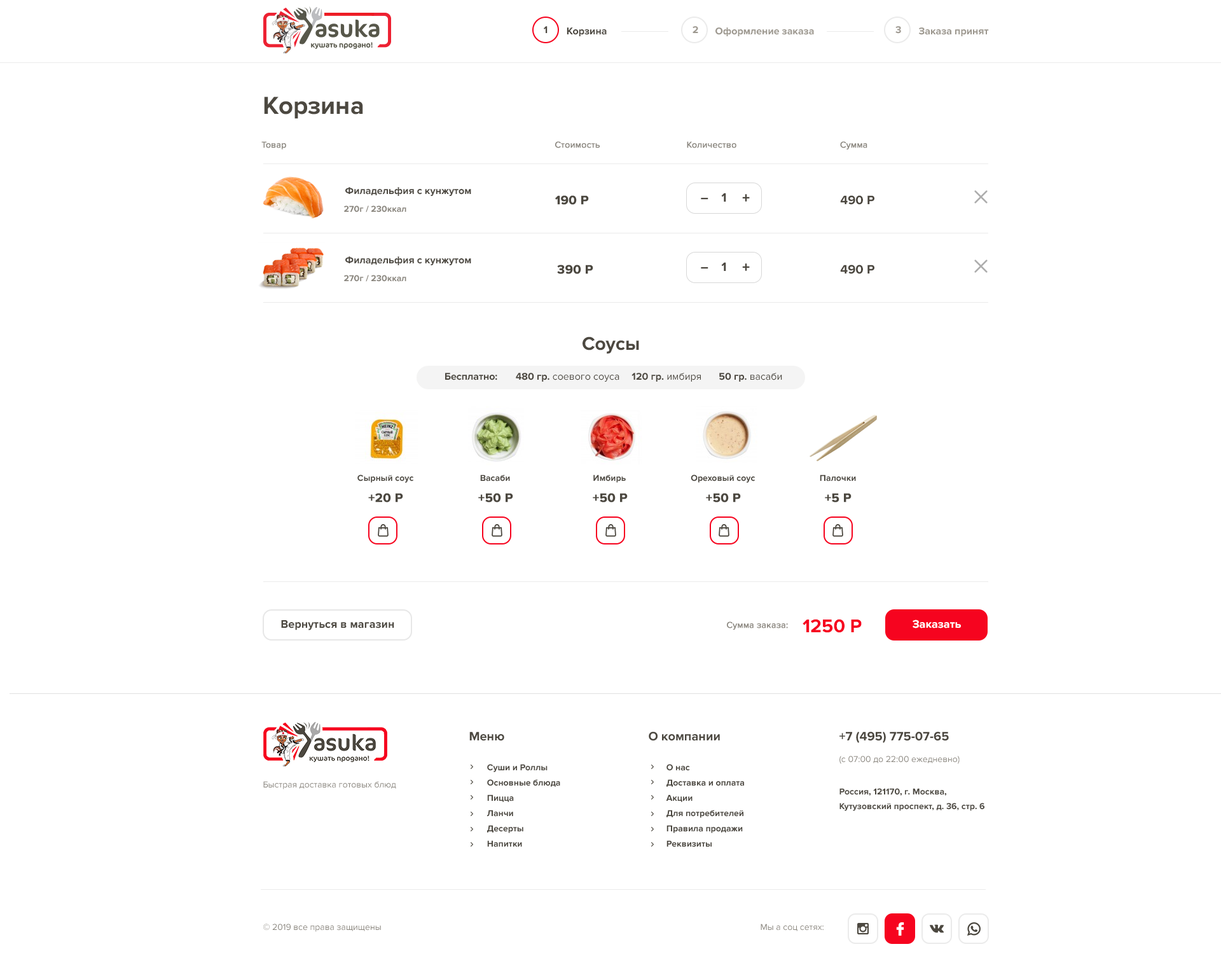
<style>
.page{position:relative;width:1221px;height:977px;background:#ffffff}
.page>*{position:absolute;margin:0}
.t1{font:10.2px "ProximaNova-Bold";color:#4c4840}
.t2{font:10.2px "ProximaNova-Bold";color:#9d988f}
.t3{font:25.4px "ProximaNova-Bold";color:#4c4840}
.t4{font:8.9px "ProximaNova-Regular";color:#8a867e;font-weight:bold}
.t5{font:12.7px "ProximaNova-Bold";color:#4c4840;font-weight:bold}
.t6{font:15.3px "ProximaNova-Extrabld";color:#4c4840;scale:0.8 1}
.t7{font:12.7px "ProximaNova-Bold";color:#4c4840}
.t8{font:15.3px "ProximaNova-Extrabld";color:#4c4840}
.t9{font:8.9px "ProximaNova-Bold";color:#8a867e}
.t10{font:19.1px "ProximaNova-Bold";color:#4c4840}
.t11{font:10.2px "ProximaNova-Regular";color:#4c4840}
.t12{font:8.9px "ProximaNova-Bold";color:#4c4840}
.t13{font:11.4px "ProximaNova-Bold";color:#4c4840}
.t14{font:19.1px "ProximaNova-Bold";color:#f6041f}
.t15{font:11.4px "ProximaNova-Bold";color:#ffffff}
.t16{font:8.9px "ProximaNova-Regular";color:#8a867e}
.t17{font:8.9px/15.3px "ProximaNova-Bold";color:#4c4840}
.t18{font:8.9px/14.6px "ProximaNova-Bold";color:#4c4840}
</style>
<div class="page">
<p class="t1" style="left:544px;top:26px;width:3px;height:7px">1</p>
<p class="t1" style="left:567px;top:27px;width:40px;height:9px">Корзина</p>
<p class="t2" style="left:692px;top:26px;width:6px;height:7px">2</p>
<p class="t2" style="left:715px;top:27px;width:99px;height:9px">Оформление заказа</p>
<p class="t2" style="left:895px;top:26px;width:6px;height:8px">3</p>
<p class="t2" style="left:919px;top:27px;width:70px;height:9px">Заказа принят</p>
<p class="t3" style="left:264px;top:97px;width:99px;height:22px">Корзина</p>
<p class="t4" style="left:261px;top:141px;width:25px;height:8px">Товар</p>
<p class="t4" style="left:555px;top:141px;width:45px;height:7px">Стоимость</p>
<p class="t4" style="left:687px;top:141px;width:49px;height:7px">Количество</p>
<p class="t4" style="left:840px;top:141px;width:27px;height:8px">Сумма</p>
<p class="t1" style="left:345px;top:187px;width:126px;height:9px">Филадельфия с кунжутом</p>
<p class="t5" style="left:555px;top:195px;width:34px;height:10px">190 P</p>
<p class="t6" style="left:701px;top:198px;width:7px;height:2px">_</p>
<p class="t7" style="left:721px;top:193px;width:5px;height:9px">1</p>
<p class="t8" style="left:742px;top:194px;width:8px;height:8px">+</p>
<p class="t7" style="left:840px;top:195px;width:34px;height:10px">490 P</p>
<p class="t9" style="left:344px;top:205px;width:62px;height:7px">270г / 230ккал</p>
<p class="t1" style="left:345px;top:256px;width:126px;height:10px">Филадельфия с кунжутом</p>
<p class="t5" style="left:557px;top:265px;width:36px;height:9px">390 P</p>
<p class="t6" style="left:701px;top:267px;width:7px;height:2px">_</p>
<p class="t7" style="left:721px;top:262px;width:5px;height:9px">1</p>
<p class="t8" style="left:742px;top:263px;width:8px;height:8px">+</p>
<p class="t7" style="left:840px;top:265px;width:34px;height:9px">490 P</p>
<p class="t9" style="left:344px;top:275px;width:62px;height:7px">270г / 230ккал</p>
<p class="t10" style="left:582px;top:336px;width:57px;height:18px">Соусы</p>
<p class="t1" style="left:445px;top:373px;width:52px;height:7px">Бесплатно:</p>
<p class="t11" style="left:516px;top:373px;width:103px;height:9px"><span class="t1">480 гр. </span>соевого соуса</p>
<p class="t1" style="left:631px;top:373px;width:70px;height:9px">120 гр. <span class="t11">имбиря</span></p>
<p class="t1" style="left:719px;top:373px;width:63px;height:9px">50 гр. <span class="t11">васаби</span></p>
<p class="t12" style="left:357px;top:474px;width:57px;height:9px">Сырный соус</p>
<p class="t12" style="left:480px;top:474px;width:30px;height:7px">Васаби</p>
<p class="t12" style="left:593px;top:474px;width:33px;height:9px">Имбирь</p>
<p class="t12" style="left:691px;top:474px;width:64px;height:9px">Ореховый соус</p>
<p class="t12" style="left:820px;top:474px;width:36px;height:7px">Палочки</p>
<p class="t5" style="left:368px;top:493px;width:35px;height:9px">+20 P</p>
<p class="t5" style="left:478px;top:493px;width:35px;height:9px">+50 P</p>
<p class="t5" style="left:593px;top:493px;width:35px;height:9px">+50 P</p>
<p class="t5" style="left:706px;top:493px;width:35px;height:9px">+50 P</p>
<p class="t5" style="left:825px;top:493px;width:26px;height:9px">+5 P</p>
<p class="t13" style="left:281px;top:620px;width:113px;height:10px">Вернуться в магазин</p>
<p class="t4" style="left:727px;top:621px;width:61px;height:9px">Сумма заказа:</p>
<p class="t14" style="left:802px;top:619px;width:60px;height:14px">1250 P</p>
<p class="t15" style="left:912px;top:619px;width:49px;height:9px">Заказать</p>
<p class="t7" style="left:469px;top:731px;width:35px;height:10px">Меню</p>
<p class="t7" style="left:649px;top:731px;width:71px;height:10px">О компании</p>
<p class="t7" style="left:839px;top:731px;width:110px;height:12px">+7 (495) 775-07-65</p>
<p class="t16" style="left:839px;top:755px;width:121px;height:9px">(с 07:00 до 22:00 ежедневно)</p>
<p class="t17" style="left:487px;top:764px;width:73px;height:83px">Суши и Роллы<br>Основные блюда<br>Пицца<br>Ланчи<br>Десерты<br>Напитки</p>
<p class="t17" style="left:666px;top:764px;width:78px;height:83px">О нас<br>Доставка и оплата <br>Акции<br>Для потребителей<br>Правила продажи<br>Реквизиты</p>
<p class="t16" style="left:263px;top:781px;width:133px;height:8px">Быстрая доставка готовых блюд</p>
<p class="t18" style="left:839px;top:788px;width:145px;height:23px">Россия, 121170, г. Москва, <br>Кутузовский проспект, д. 36, стр. 6</p>
<p class="t16" style="left:263px;top:923px;width:118px;height:9px">© 2019 все права защищены</p>
<p class="t16" style="left:761px;top:923px;width:62px;height:8px">Мы а соц сетях:</p>
</div>
